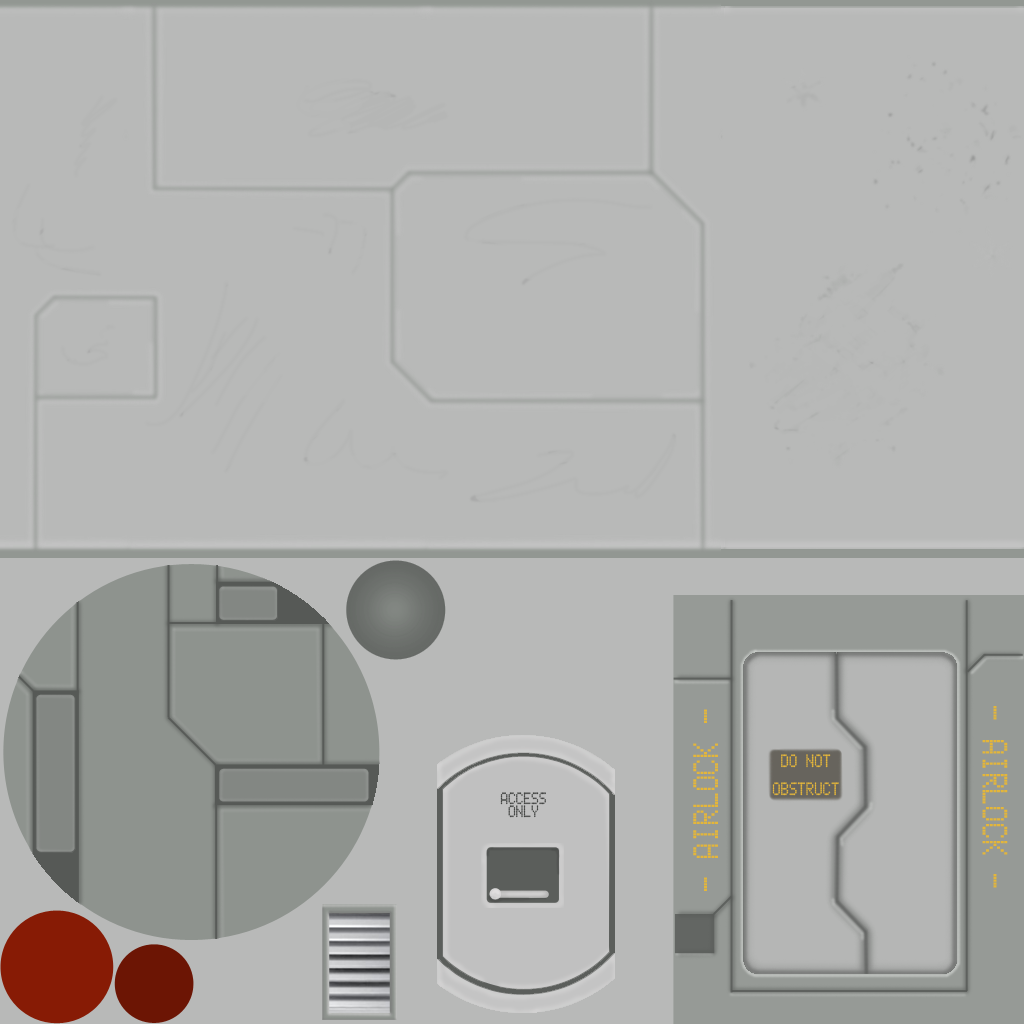
<style>
.page{position:relative;width:1024px;height:1024px;background:#b8b9b8}
.page>*{position:absolute;margin:0}
.t1{font:31.2px "LCD5x8H";color:#e4b63a;scale:0.77 1}
.t2{font:15.6px "LCD5x8H";color:#e4b63a;scale:0.77 1}
.t3{font:14.3px "LCD5x8H";color:#444644;scale:0.77 1}
</style>
<div class="page">
<p class="t1" style="left:693px;top:709px;width:25px;height:182px;rotate:-90deg">- AIRLOCK -</p>
<p class="t1" style="left:982px;top:706px;width:26px;height:182px;rotate:90deg">- AIRLOCK -</p>
<p class="t2" style="left:772px;top:754px;width:67px;height:42px;text-align:center">DO NOT<br> <br>OBSTRUCT</p>
<p class="t3" style="left:500px;top:792px;width:46px;height:26px;text-align:center">ACCESS<br>ONLY</p>
</div>
